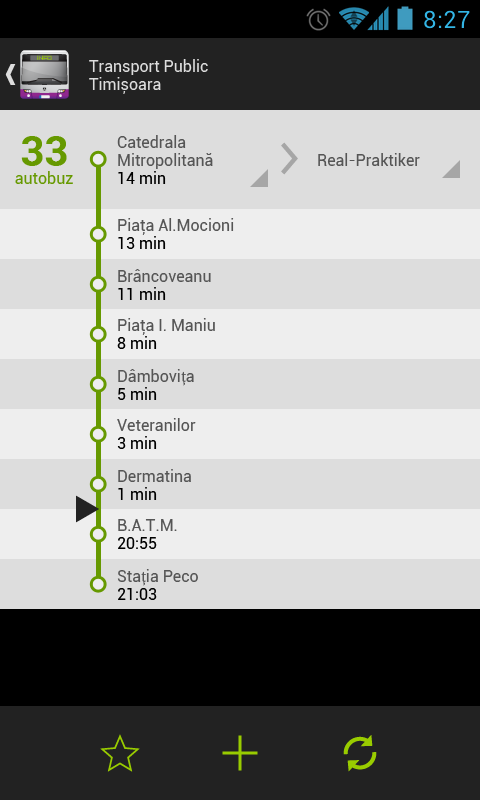
<style>
.page{position:relative;width:480px;height:800px;background:#dddddd}
.page>*{position:absolute;margin:0}
.t1{font:16px/18px "Roboto-Regular";color:#dddddd}
.t2{font:42px "Roboto-Bold";color:#669900}
.t3{font:16px/18px "Roboto-Regular";color:#555555}
.t4{font:16px/18px "Roboto-Regular";color:#000000}
.t5{font:16px "Roboto-Regular";color:#555555}
.t6{font:16px "Roboto-Regular";color:#669900}
.t7{font:16px/18px "MinionPro-Regular";color:#555555}
</style>
<div class="page">
<p class="t1" style="left:89px;top:59px;width:119px;height:35px">Transport Public<br>Timișoara</p>
<p class="t2" style="left:21px;top:136px;width:46px;height:30px">33</p>
<p class="t3" style="left:117px;top:135px;width:96px;height:49px">Catedrala<br>Mitropolitană<br><span class="t4">14 min</span></p>
<p class="t5" style="left:318px;top:153px;width:102px;height:13px">Real-Praktiker</p>
<p class="t6" style="left:15px;top:171px;width:58px;height:13px">autobuz</p>
<p class="t3" style="left:118px;top:218px;width:116px;height:31px">Piaţa Al.Mocioni<br><span class="t4">13 min</span></p>
<p class="t3" style="left:118px;top:269px;width:93px;height:31px">Brâncoveanu<br><span class="t4">11 min</span></p>
<p class="t3" style="left:117px;top:318px;width:98px;height:31px">Piaţa I. Maniu<br><span class="t4">8 min</span></p>
<p class="t3" style="left:118px;top:369px;width:76px;height:31px">Dâmbovi<span class="t7">ț</span>a<br><span class="t4">5 min</span></p>
<p class="t3" style="left:117px;top:418px;width:79px;height:31px">Veteranilor<br><span class="t4">3 min</span></p>
<p class="t3" style="left:118px;top:469px;width:73px;height:31px">Dermatina<br><span class="t4">1 min</span></p>
<p class="t3" style="left:118px;top:519px;width:59px;height:30px">B.A.T.M.<br><span class="t4">20:55</span></p>
<p class="t3" style="left:117px;top:569px;width:81px;height:31px">Sta<span class="t7">ț</span>ia Peco<br><span class="t4">21:03</span></p>
</div>
